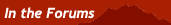
<style>
.page{position:relative;width:171px;height:25px;background:#a81f01}
.page>*{position:absolute;margin:0}
.t1{font:14px "Trebuchet-BoldItalic";color:#ffffff}
</style>
<div class="page">
<p class="t1" style="left:4px;top:7px;width:91px;height:12px">In the Forums</p>
</div>
